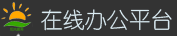
<style>
.page{position:relative;width:177px;height:36px;background:#333333}
.page>*{position:absolute;margin:0}
.t1{font:22px "YouYuan";color:#dbecf3}
</style>
<div class="page">
<p class="t1" style="left:41px;top:9px;width:131px;height:22px">在线办公平台</p>
</div>
